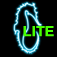
<style>
.page{position:relative;width:57px;height:57px;background:#000000}
.page>*{position:absolute;margin:0}
.t1{font:14px "Arial-BoldMT";letter-spacing:-0.01em;color:#48ff00;font-weight:bold}
</style>
<div class="page">
<p class="t1" style="left:23px;top:26px;width:31px;height:11px">LITE</p>
</div>
